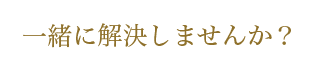
<style>
.page{position:relative;width:314px;height:70px;background:#ffffff}
.page>*{position:absolute;margin:0}
.t1{font:25px "HiraMinProN-W3";color:#8f712b}
</style>
<div class="page">
<p class="t1" style="left:23px;top:23px;width:268px;height:25px">一緒に解決しませんか？</p>
</div>
